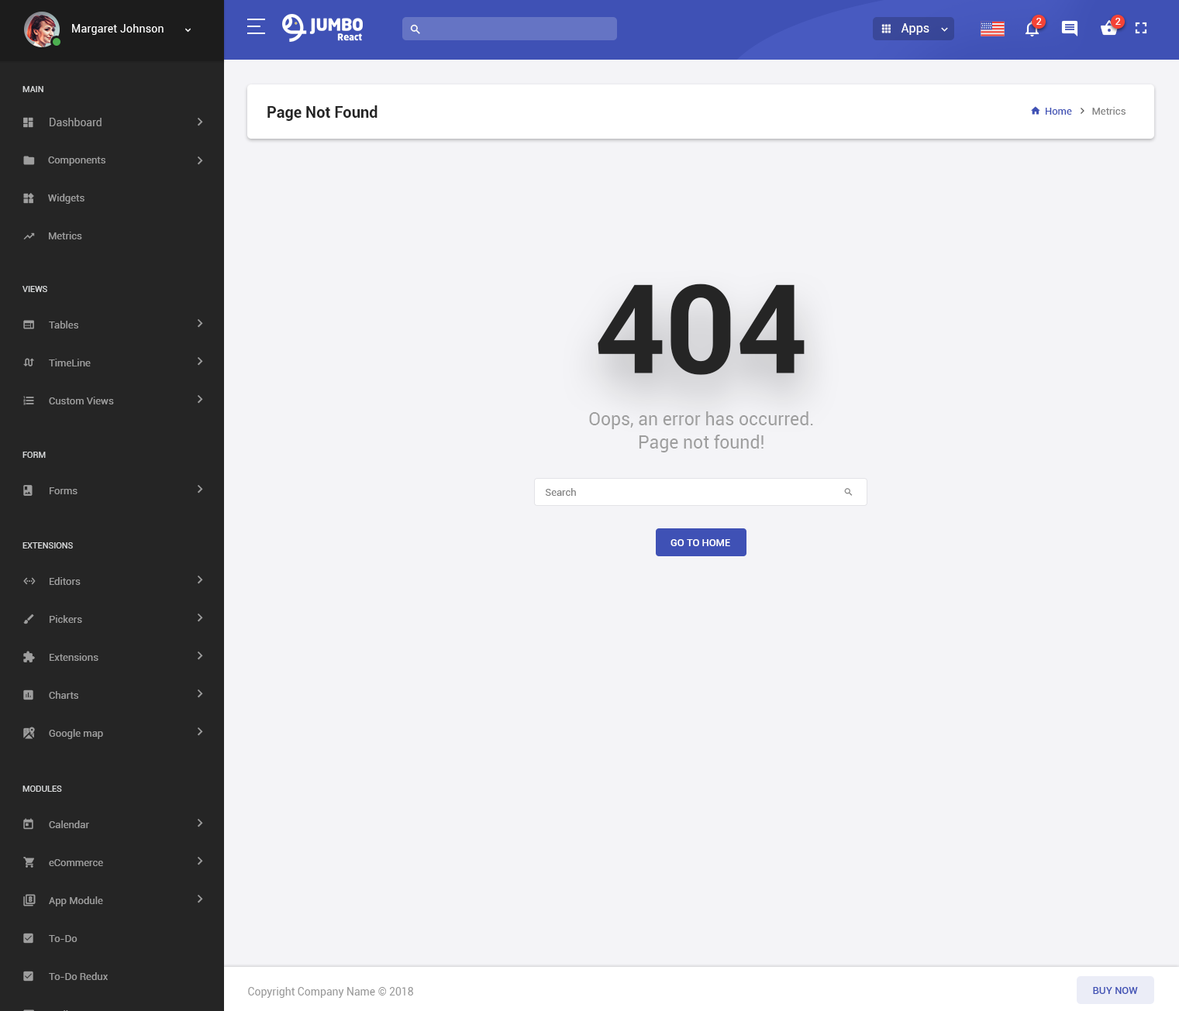
<style>
.page{position:relative;width:1179px;height:1011px;background:#f4f4f7}
.page>*{position:absolute;margin:0}
.t1{font:10.1px "Roboto-Regular";color:#ffffff}
.t2{font:10.9px "Roboto-Regular";letter-spacing:0.02em;color:#fafafa}
.t3{font:12.4px "Roboto-Regular";color:#ffffff}
.t4{font:8.5px "Roboto-Regular";color:#d6d8d9;text-transform:uppercase}
.t5{font:15.5px "Roboto-Bold";color:#252525}
.t6{font:10.1px "Roboto-Regular";color:#808080}
.t7{font:10.1px "Roboto-Regular";color:#3f51b5}
.t8{font:10.9px "Roboto-Regular";color:#9e9e9e}
.t9{font:10.1px/38px "Roboto-Regular";color:#9e9e9e}
.t10{font:124px "Roboto-Bold";color:#252525}
.t11{font:17.8px/23.3px "Roboto-Regular";color:#9e9e9e}
.t12{font:10.1px "Roboto-Regular";color:#9e9e9e}
.t13{font:10.1px "Roboto-Medium";color:#ffffff;text-transform:uppercase}
.t14{font:10.9px "Roboto-Regular";color:#999999}
.t15{font:10.1px "Roboto-Medium";color:#3f51b5;text-transform:uppercase}
</style>
<div class="page">
<p class="t1" style="left:1036px;top:18px;width:6px;height:7px">2</p>
<p class="t1" style="left:1115px;top:18px;width:6px;height:7px">2</p>
<p class="t2" style="left:72px;top:24px;width:92px;height:11px">Margaret Johnson</p>
<p class="t3" style="left:901px;top:23px;width:28px;height:12px">Apps</p>
<p class="t4" style="left:22px;top:86px;width:21px;height:6px">main</p>
<p class="t5" style="left:267px;top:105px;width:110px;height:16px">Page Not Found</p>
<p class="t6" style="left:1046px;top:107px;width:79px;height:8px"><span class="t7">Home       </span> Metrics</p>
<p class="t8" style="left:50px;top:118px;width:52px;height:8px">Dashboard</p>
<p class="t9" style="left:48px;top:157px;width:57px;height:83px">Components<br>Widgets<br>Metrics</p>
<p class="t4" style="left:22px;top:286px;width:25px;height:6px">Views</p>
<p class="t10" style="left:598px;top:284px;width:207px;height:91px">404</p>
<p class="t9" style="left:49px;top:321px;width:65px;height:84px">Tables<br>TimeLine<br>Custom Views</p>
<p class="t11" style="left:589px;top:412px;width:224px;height:41px;text-align:center">Oops, an error has occurred.<br>Page not found!</p>
<p class="t4" style="left:22px;top:452px;width:24px;height:6px">FORM</p>
<p class="t12" style="left:50px;top:488px;width:28px;height:7px">Forms</p>
<p class="t6" style="left:545px;top:488px;width:31px;height:8px">Search</p>
<p class="t4" style="left:22px;top:543px;width:51px;height:6px">Extensions</p>
<p class="t13" style="left:670px;top:539px;width:60px;height:7px">Go to home</p>
<p class="t9" style="left:49px;top:577px;width:54px;height:162px">Editors<br>Pickers<br>Extensions<br>Charts<br>Google map</p>
<p class="t4" style="left:22px;top:786px;width:40px;height:6px">Modules</p>
<p class="t14" style="left:248px;top:987px;width:165px;height:11px">Copyright Company Name © 2018</p>
<p class="t15" style="left:1093px;top:987px;width:45px;height:7px">Buy Now</p>
</div>
